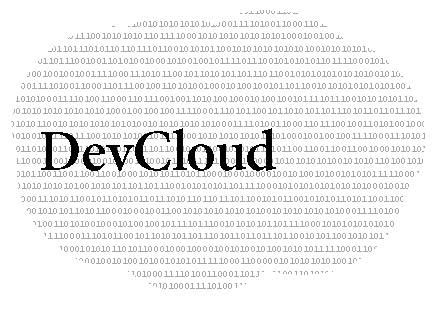
<style>
.page{position:relative;width:433px;height:319px;background:#ffffff}
.page>*{position:absolute;margin:0}
.t1{font:58.3px "MinionPro-Semibold";color:#000000}
</style>
<div class="page">
<p class="t1" style="left:41px;top:128px;width:235px;height:43px">DevCloud</p>
</div>
